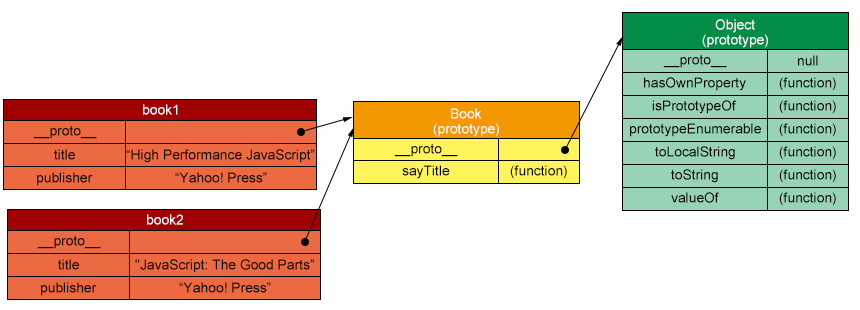
<style>
.page{position:relative;width:860px;height:310px;background:#ffffff}
.page>*{position:absolute;margin:0}
.t1{font:13.8px "ArialMT";color:#fffefe}
.t2{font:13.8px "ArialMT";color:#000000}
</style>
<div class="page">
<p class="t1" style="left:715px;top:19px;width:40px;height:14px">Object</p>
<p class="t1" style="left:702px;top:34px;width:66px;height:14px">(prototype)</p>
<p class="t2" style="left:663px;top:54px;width:64px;height:14px">__proto__</p>
<p class="t2" style="left:798px;top:55px;width:20px;height:11px">null</p>
<p class="t2" style="left:644px;top:77px;width:102px;height:14px">hasOwnProperty</p>
<p class="t2" style="left:779px;top:77px;width:57px;height:14px">(function)</p>
<p class="t2" style="left:652px;top:100px;width:84px;height:14px">isPrototypeOf</p>
<p class="t2" style="left:779px;top:100px;width:57px;height:14px">(function)</p>
<p class="t1" style="left:143px;top:104px;width:35px;height:11px">book1</p>
<p class="t1" style="left:451px;top:108px;width:31px;height:11px">Book</p>
<p class="t2" style="left:33px;top:125px;width:64px;height:14px">__proto__</p>
<p class="t1" style="left:433px;top:123px;width:66px;height:14px">(prototype)</p>
<p class="t2" style="left:630px;top:123px;width:131px;height:14px">prototypeEnumerable</p>
<p class="t2" style="left:779px;top:123px;width:57px;height:14px">(function)</p>
<p class="t2" style="left:54px;top:149px;width:21px;height:11px">title</p>
<p class="t2" style="left:126px;top:149px;width:189px;height:14px">“High Performance JavaScript”</p>
<p class="t2" style="left:394px;top:143px;width:64px;height:14px">__proto__</p>
<p class="t2" style="left:655px;top:146px;width:80px;height:14px">toLocalString</p>
<p class="t2" style="left:779px;top:146px;width:57px;height:14px">(function)</p>
<p class="t2" style="left:37px;top:172px;width:56px;height:14px">publisher</p>
<p class="t2" style="left:175px;top:172px;width:92px;height:11px">“Yahoo! Press”</p>
<p class="t2" style="left:402px;top:165px;width:48px;height:14px">sayTitle</p>
<p class="t2" style="left:510px;top:165px;width:57px;height:14px">(function)</p>
<p class="t2" style="left:671px;top:169px;width:47px;height:14px">toString</p>
<p class="t2" style="left:779px;top:169px;width:57px;height:14px">(function)</p>
<p class="t2" style="left:671px;top:192px;width:48px;height:11px">valueOf</p>
<p class="t2" style="left:779px;top:192px;width:57px;height:14px">(function)</p>
<p class="t1" style="left:147px;top:214px;width:36px;height:11px">book2</p>
<p class="t2" style="left:37px;top:235px;width:64px;height:14px">__proto__</p>
<p class="t2" style="left:58px;top:259px;width:21px;height:11px">title</p>
<p class="t2" style="left:135px;top:259px;width:179px;height:14px">"JavaScript: The Good Parts”</p>
<p class="t2" style="left:41px;top:282px;width:56px;height:14px">publisher</p>
<p class="t2" style="left:179px;top:282px;width:92px;height:11px">“Yahoo! Press”</p>
</div>
